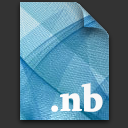
<style>
.page{position:relative;width:128px;height:128px;background:#333333}
.page>*{position:absolute;margin:0}
.t1{font:36px "Dolly-Bold";color:#ffffff}
</style>
<div class="page">
<p class="t1" style="left:51px;top:83px;width:52px;height:29px">.nb</p>
</div>
